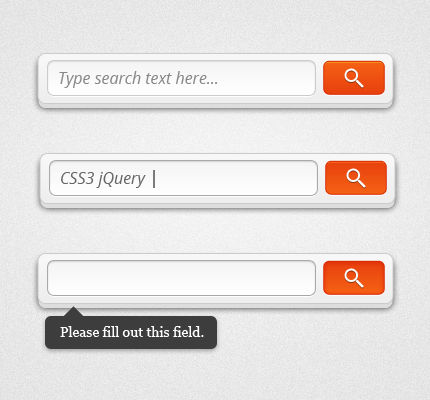
<style>
.page{position:relative;width:430px;height:400px}
.page>*{position:absolute;margin:0}
.t1{font:16px "OpenSans-Italic";color:#888888}
.t2{font:16px "OpenSans-Italic";color:#666666}
.t3{font:18px "OpenSans";color:#3d3d3d}
.t4{font:14px "Georgia";color:#ffffff}
</style>
<div class="page">
<p class="t1" style="left:59px;top:71px;width:158px;height:17px">Type search text here...</p>
<p class="t2" style="left:61px;top:170px;width:94px;height:18px">CSS3 jQuery <span class="t3">|</span></p>
<p class="t4" style="left:60px;top:326px;width:144px;height:11px">Please fill out this field.</p>
</div>
